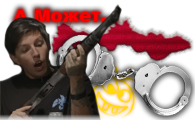
<style>
.page{position:relative;width:195px;height:120px}
.page>*{position:absolute;margin:0}
.t1{font:18px "Arial-Black";color:#ff0000}
</style>
<div class="page">
<p class="t1" style="left:13px;top:9px;width:105px;height:13px">А Может...</p>
</div>
